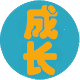
<style>
.page{position:relative;width:80px;height:80px;background:#ffffff}
.page>*{position:absolute;margin:0}
.t1{font:36px/36px "STHupo";color:#f8a80d}
</style>
<div class="page">
<p class="t1" style="left:23px;top:5px;width:35px;height:71px">成<br>长</p>
</div>
